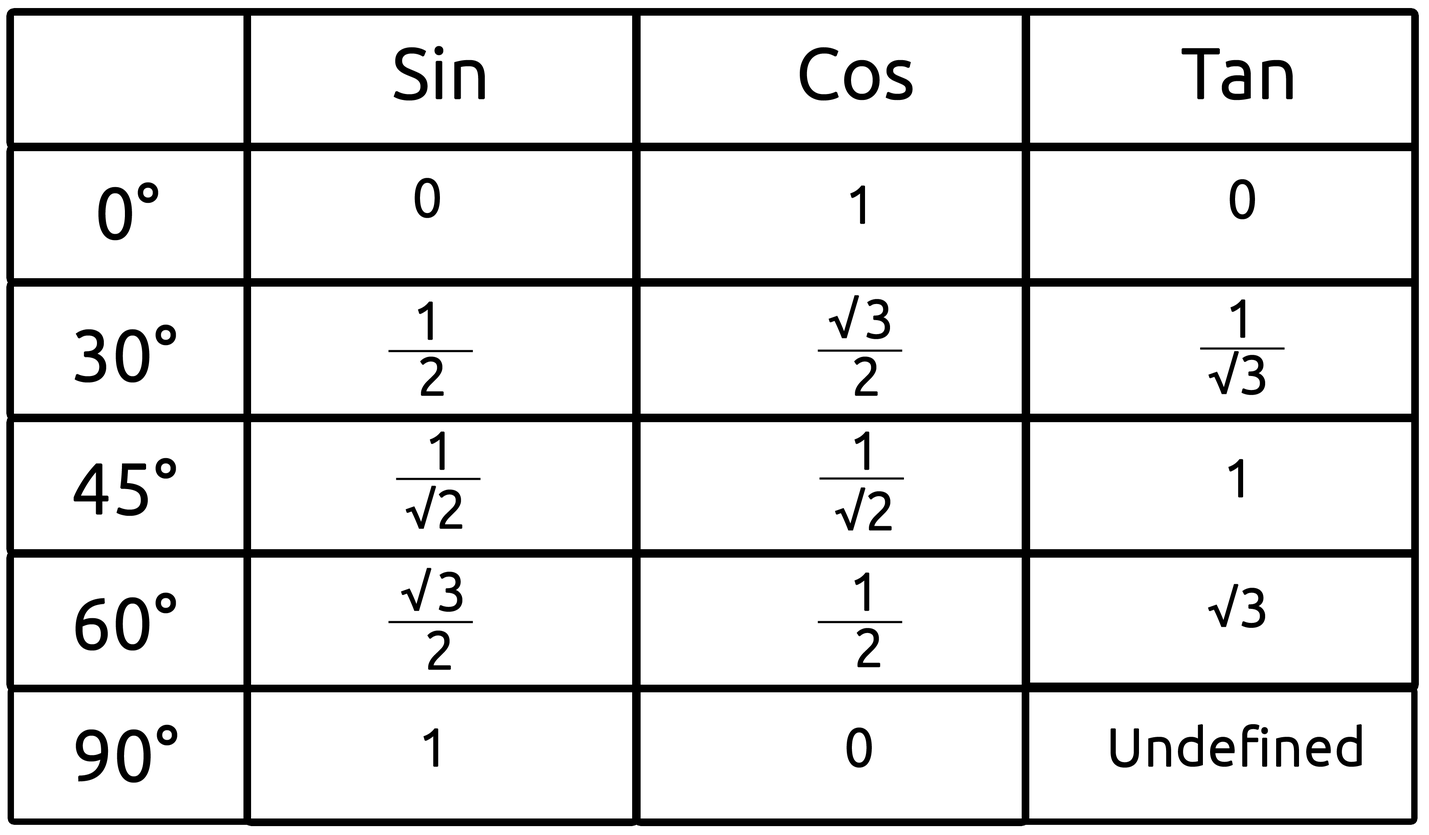
<style>
.page{position:relative;width:1429px;height:835px;background:#ffffff}
.page>*{position:absolute;margin:0}
.t1{font:70.5px "Ubuntu-Light";color:#000000;font-weight:bold}
.t2{font:52.9px "Ubuntu-Light";letter-spacing:0.08em;color:#000000;font-weight:bold}
.t3{font:52.9px "Ubuntu-Light";color:#000000;font-weight:bold}
</style>
<div class="page">
<p class="t1" style="left:393px;top:46px;width:92px;height:55px">Sin</p>
<p class="t1" style="left:800px;top:47px;width:113px;height:54px">Cos</p>
<p class="t1" style="left:1181px;top:48px;width:111px;height:52px">Tan</p>
<p class="t1" style="left:98px;top:182px;width:60px;height:58px">0°</p>
<p class="t2" style="left:414px;top:178px;width:26px;height:40px">0</p>
<p class="t2" style="left:850px;top:185px;width:15px;height:39px">1</p>
<p class="t2" style="left:1229px;top:179px;width:26px;height:40px">0</p>
<p class="t2" style="left:418px;top:301px;width:15px;height:39px">1</p>
<p class="t2" style="left:828px;top:295px;width:62px;height:44px">√3</p>
<p class="t2" style="left:1230px;top:299px;width:15px;height:39px">1</p>
<p class="t1" style="left:74px;top:324px;width:102px;height:59px">30°</p>
<p class="t3" style="left:1208px;top:351px;width:57px;height:44px">√<span class="t2">3</span></p>
<p class="t2" style="left:420px;top:356px;width:24px;height:40px"><span class="t3">  </span>2</p>
<p class="t2" style="left:854px;top:356px;width:23px;height:40px"><span class="t3">  </span>2</p>
<p class="t2" style="left:430px;top:431px;width:14px;height:39px">1</p>
<p class="t2" style="left:854px;top:431px;width:15px;height:39px">1</p>
<p class="t1" style="left:74px;top:458px;width:102px;height:58px">45°</p>
<p class="t2" style="left:1228px;top:459px;width:15px;height:38px">1</p>
<p class="t3" style="left:406px;top:486px;width:56px;height:43px">√<span class="t2">2</span></p>
<p class="t3" style="left:835px;top:487px;width:56px;height:43px">√<span class="t2">2</span></p>
<p class="t2" style="left:401px;top:568px;width:61px;height:44px">√3</p>
<p class="t2" style="left:854px;top:572px;width:15px;height:39px">1</p>
<p class="t1" style="left:75px;top:592px;width:101px;height:59px">60°</p>
<p class="t3" style="left:1208px;top:584px;width:57px;height:44px">√3</p>
<p class="t2" style="left:856px;top:628px;width:24px;height:39px"><span class="t3">  </span>2</p>
<p class="t2" style="left:427px;top:630px;width:24px;height:40px"><span class="t3">  </span>2</p>
<p class="t1" style="left:76px;top:724px;width:101px;height:59px">90°</p>
<p class="t3" style="left:1110px;top:724px;width:251px;height:43px">Undefined</p>
<p class="t2" style="left:423px;top:728px;width:15px;height:39px">1</p>
<p class="t2" style="left:846px;top:727px;width:26px;height:40px">0</p>
</div>
